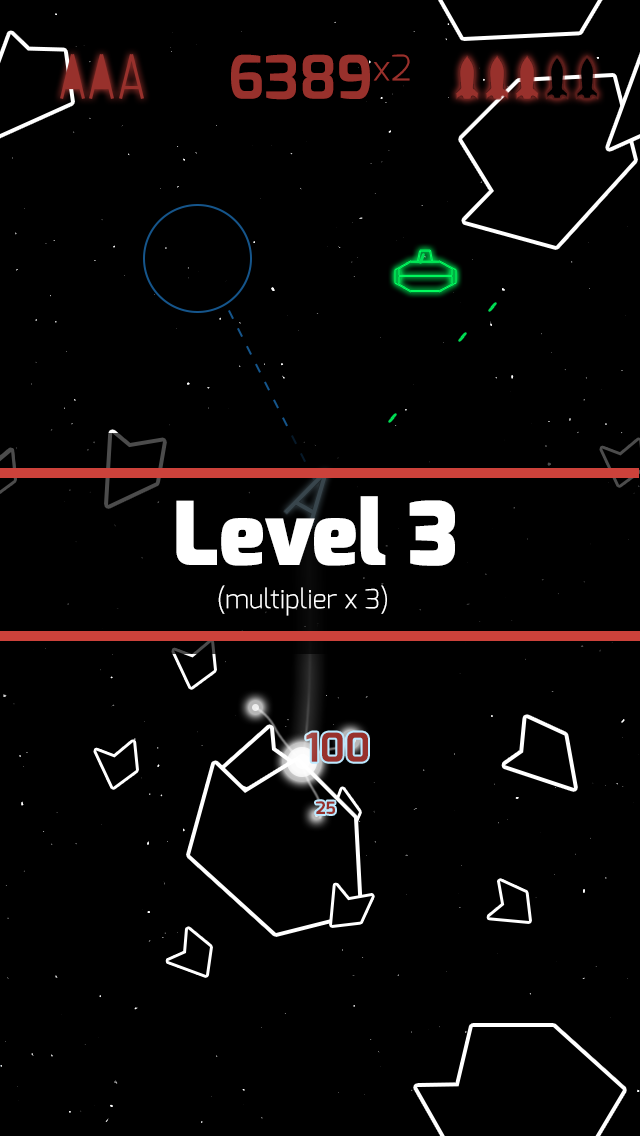
<style>
.page{position:relative;width:640px;height:1136px;background:#000000}
.page>*{position:absolute;margin:0}
.t1{font:59.7px "Exo-Bold";color:#98312c}
.t2{font:60px "Exo-Light";color:#98312c}
.t3{font:87.8px "Exo-Black";color:#ffffff}
.t4{font:26.4px "Exo-Light";color:#ffffff}
.t5{font:40px "Exo-Bold";color:#98312c}
.t6{font:17px "Exo-Bold";color:#98312c}
</style>
<div class="page">
<p class="t1" style="left:231px;top:54px;width:139px;height:46px">6389</p>
<p class="t2" style="left:373px;top:54px;width:37px;height:27px">x2</p>
<p class="t3" style="left:176px;top:496px;width:279px;height:70px">Level 3</p>
<p class="t4" style="left:218px;top:585px;width:169px;height:31px">(multiplier x 3)</p>
<p class="t5" style="left:306px;top:732px;width:62px;height:30px">100</p>
<p class="t6" style="left:316px;top:801px;width:19px;height:13px">25</p>
</div>
